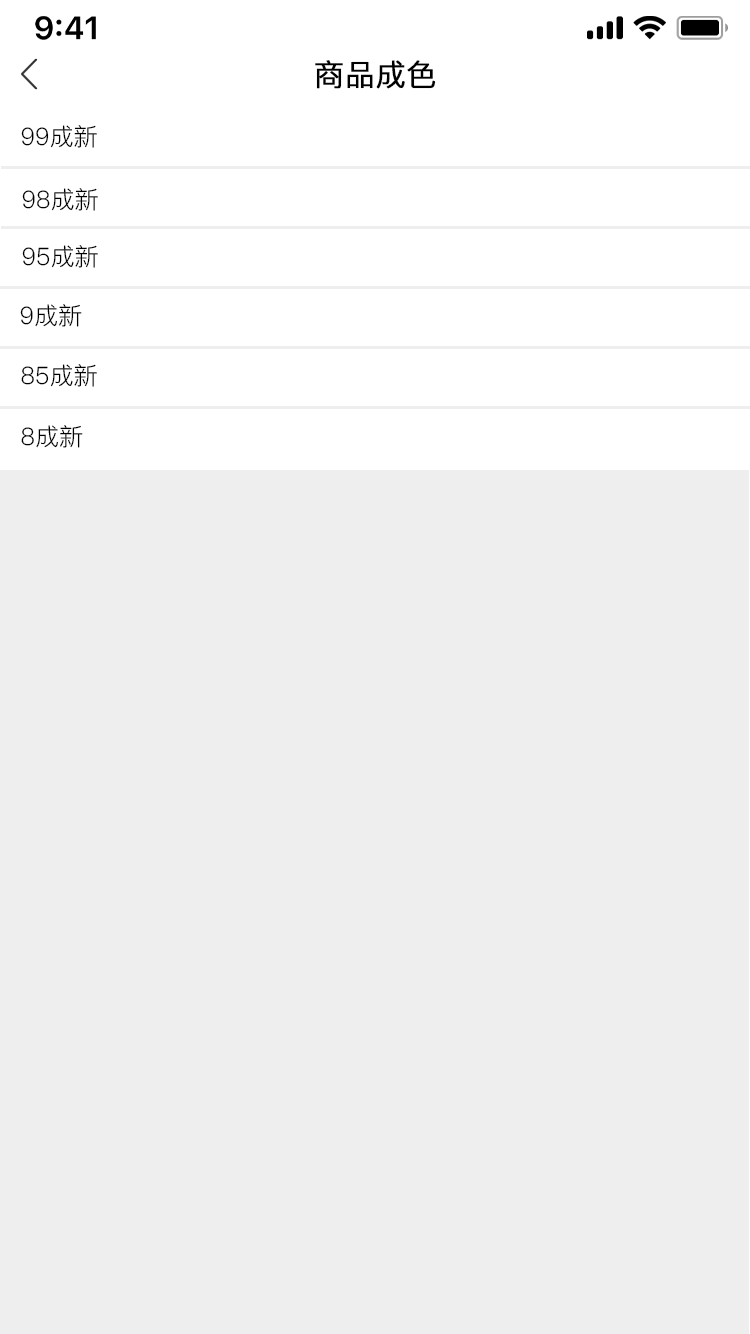
<style>
.page{position:relative;width:750px;height:1334px;background:#eeeeee}
.page>*{position:absolute;margin:0}
.t1{font:30px "PingFang-SC-Regular";color:#000000;font-weight:bold}
.t2{font:24px "PingFang-SC-Regular";color:#000000}
</style>
<div class="page">
<p class="t1" style="left:315px;top:60px;width:121px;height:29px">商品成色</p>
<p class="t2" style="left:21px;top:125px;width:76px;height:23px">99成新</p>
<p class="t2" style="left:22px;top:188px;width:76px;height:23px">98成新</p>
<p class="t2" style="left:22px;top:245px;width:76px;height:23px">95成新</p>
<p class="t2" style="left:20px;top:304px;width:62px;height:23px">9成新</p>
<p class="t2" style="left:21px;top:364px;width:76px;height:23px">85成新</p>
<p class="t2" style="left:21px;top:425px;width:62px;height:23px">8成新</p>
</div>
